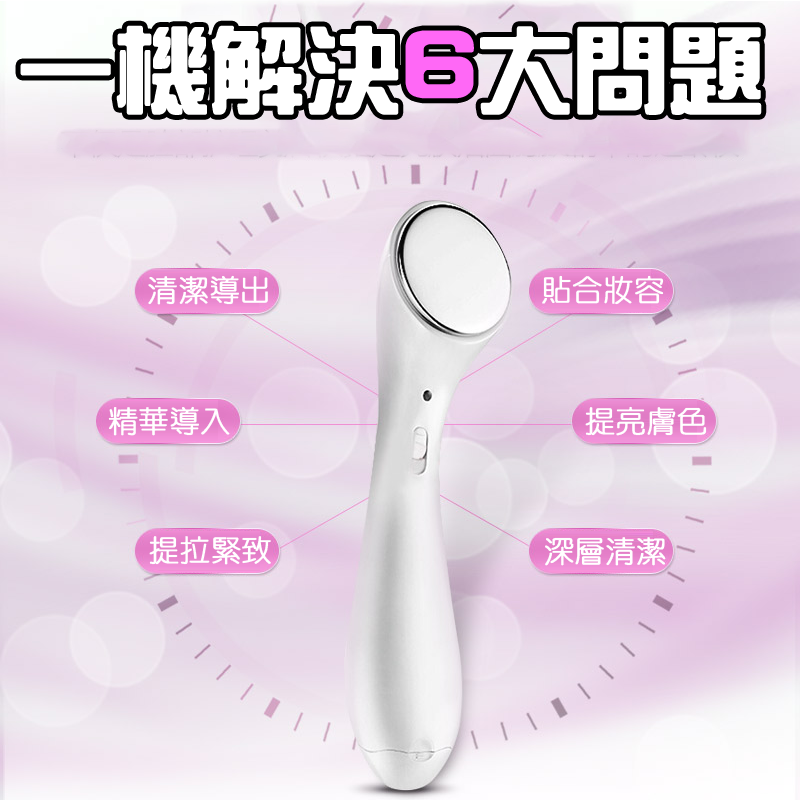
<style>
.page{position:relative;width:800px;height:800px}
.page>*{position:absolute;margin:0}
.t1{font:93.3px "HanWangZonYi";color:#ffffff;font-weight:bold}
.t2{font:100px "HanWangZonYi";color:#ff68f6;font-weight:bold}
.t3{font:30px "HanWangYenLight";color:#ffffff;font-weight:bold}
</style>
<div class="page">
<p class="t1" style="left:20px;top:25px;width:742px;height:90px">一機解決<span class="t2">6</span>大問題</p>
<p class="t3" style="left:148px;top:275px;width:120px;height:30px">清潔導出</p>
<p class="t3" style="left:542px;top:275px;width:122px;height:30px">貼合妝容</p>
<p class="t3" style="left:108px;top:406px;width:122px;height:30px">精華導入</p>
<p class="t3" style="left:585px;top:406px;width:122px;height:30px">提亮膚色</p>
<p class="t3" style="left:149px;top:536px;width:122px;height:29px">提拉緊致</p>
<p class="t3" style="left:545px;top:537px;width:121px;height:29px">深層清潔</p>
</div>
